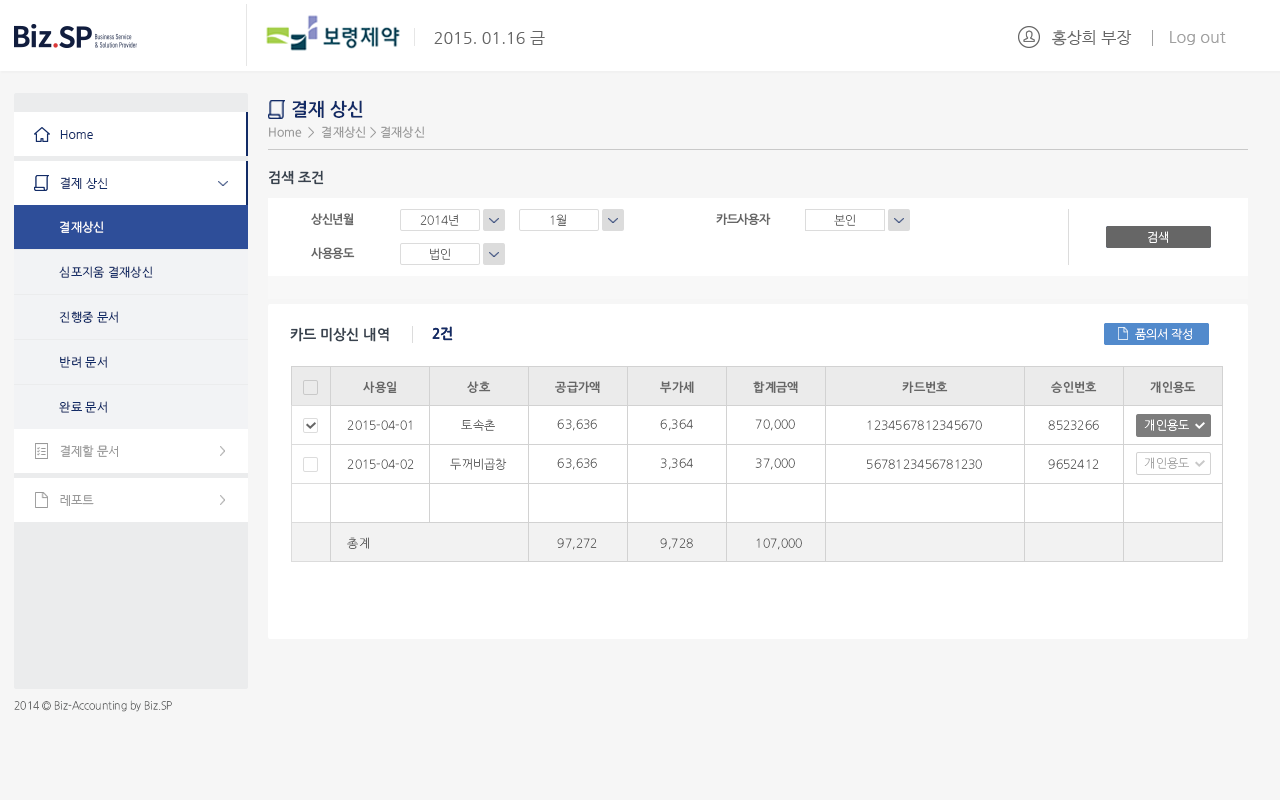
<style>
.page{position:relative;width:1280px;height:800px;background:#ffffff}
.page>*{position:absolute;margin:0}
.t1{font:16px "NanumGothic";color:#666666}
.t2{font:16px "NanumGothic";color:#a0a0a0}
.t3{font:18px "NanumGothicOTFBold";color:#122b66}
.t4{font:12px "NanumGothicOTF";color:#999999}
.t5{font:12px "NanumGothic";color:#122b66}
.t6{font:14px "NanumGothicOTFBold";color:#38424e}
.t7{font:12px "NanumGothicOTF";color:#ffffff}
.t8{font:12px "NanumGothicOTFBold";letter-spacing:-0.025em;color:#666666}
.t9{font:12px "NanumGothicOTFLight";letter-spacing:-0.025em;color:#666666}
.t10{font:12px "NanumGothicOTFLight";letter-spacing:-0.025em;color:#ffffff}
.t11{font:12px "NanumGothicOTF";color:#122b66}
.t12{font:14px "NanumGothicOTFBold";color:#122b66}
.t13{font:12px "NanumGothicOTFBold";color:#666666}
.t14{font:12px "NanumGothicOTFLight";color:#666666}
.t15{font:12px "NanumGothicOTFLight";color:#fefefe}
.t16{font:12px "NanumGothic";color:#999999}
.t17{font:12px "NanumGothicOTFLight"}
.t18{font:12px "NanumGothicOTFLight";color:#aaaaaa}
.t19{font:11px "NanumGothicOTFLight";color:#6c6d6d;scale:0.94 1}
</style>
<div class="page">
<p class="t1" style="left:1052px;top:30px;width:80px;height:16px">홍상희 부장</p>
<p class="t1" style="left:434px;top:31px;width:111px;height:14px">2015. 01.16 금</p>
<p class="t2" style="left:1170px;top:31px;width:56px;height:14px">Log out</p>
<p class="t3" style="left:292px;top:100px;width:71px;height:18px">결재 상신</p>
<p class="t4" style="left:269px;top:126px;width:156px;height:12px">Home  &gt;  결재상신 &gt; 결재상신</p>
<p class="t5" style="left:60px;top:130px;width:33px;height:9px">Home</p>
<p class="t5" style="left:60px;top:130px;width:33px;height:9px">Home</p>
<p class="t6" style="left:269px;top:170px;width:55px;height:15px">검색 조건</p>
<p class="t5" style="left:60px;top:177px;width:48px;height:12px">결제 상신</p>
<p class="t7" style="left:60px;top:221px;width:44px;height:12px">결재상신</p>
<p class="t8" style="left:311px;top:213px;width:43px;height:13px">상신년월</p>
<p class="t9" style="left:420px;top:214px;width:39px;height:12px">2014년</p>
<p class="t9" style="left:550px;top:214px;width:16px;height:12px">1월</p>
<p class="t8" style="left:716px;top:213px;width:55px;height:12px">카드사용자</p>
<p class="t9" style="left:834px;top:214px;width:21px;height:12px">본인</p>
<p class="t10" style="left:1148px;top:231px;width:20px;height:12px">검색</p>
<p class="t10" style="left:1148px;top:231px;width:20px;height:12px">검색</p>
<p class="t8" style="left:311px;top:247px;width:44px;height:12px">사용용도</p>
<p class="t9" style="left:430px;top:248px;width:20px;height:12px">법인</p>
<p class="t11" style="left:59px;top:266px;width:94px;height:12px">심포지움 결재상신</p>
<p class="t11" style="left:59px;top:311px;width:59px;height:12px">진행중 문서</p>
<p class="t6" style="left:290px;top:327px;width:99px;height:15px">카드 미상신 내역</p>
<p class="t12" style="left:432px;top:326px;width:21px;height:15px">2건</p>
<p class="t12" style="left:432px;top:326px;width:21px;height:15px">2건</p>
<p class="t10" style="left:1135px;top:328px;width:57px;height:12px">품의서 작성</p>
<p class="t10" style="left:1135px;top:328px;width:57px;height:12px">품의서 작성</p>
<p class="t11" style="left:60px;top:356px;width:47px;height:12px">반려 문서</p>
<p class="t13" style="left:363px;top:381px;width:34px;height:12px">사용일</p>
<p class="t13" style="left:363px;top:381px;width:34px;height:12px">사용일</p>
<p class="t13" style="left:467px;top:381px;width:24px;height:12px">상호</p>
<p class="t13" style="left:467px;top:381px;width:24px;height:12px">상호</p>
<p class="t13" style="left:555px;top:381px;width:45px;height:12px">공급가액</p>
<p class="t13" style="left:555px;top:381px;width:45px;height:12px">공급가액</p>
<p class="t13" style="left:660px;top:381px;width:34px;height:12px">부가세</p>
<p class="t13" style="left:660px;top:381px;width:34px;height:12px">부가세</p>
<p class="t13" style="left:753px;top:381px;width:45px;height:12px">합계금액</p>
<p class="t13" style="left:753px;top:381px;width:45px;height:12px">합계금액</p>
<p class="t13" style="left:902px;top:381px;width:46px;height:12px">카드번호</p>
<p class="t13" style="left:902px;top:381px;width:46px;height:12px">카드번호</p>
<p class="t13" style="left:1051px;top:381px;width:46px;height:12px">승인번호</p>
<p class="t13" style="left:1051px;top:381px;width:46px;height:12px">승인번호</p>
<p class="t13" style="left:1150px;top:381px;width:46px;height:12px">개인용도</p>
<p class="t13" style="left:1150px;top:381px;width:46px;height:12px">개인용도</p>
<p class="t11" style="left:59px;top:401px;width:48px;height:12px">완료 문서</p>
<p class="t14" style="left:347px;top:420px;width:65px;height:10px">2015-04-01</p>
<p class="t14" style="left:347px;top:420px;width:65px;height:10px">2015-04-01</p>
<p class="t14" style="left:347px;top:420px;width:65px;height:10px">2015-04-01</p>
<p class="t14" style="left:347px;top:420px;width:65px;height:10px">2015-04-01</p>
<p class="t14" style="left:461px;top:419px;width:34px;height:12px">토속촌</p>
<p class="t14" style="left:461px;top:419px;width:34px;height:12px">토속촌</p>
<p class="t14" style="left:461px;top:419px;width:34px;height:12px">토속촌</p>
<p class="t14" style="left:461px;top:419px;width:34px;height:12px">토속촌</p>
<p class="t14" style="left:557px;top:419px;width:40px;height:12px">63,636</p>
<p class="t14" style="left:557px;top:419px;width:40px;height:12px">63,636</p>
<p class="t14" style="left:557px;top:419px;width:40px;height:12px">63,636</p>
<p class="t14" style="left:557px;top:419px;width:40px;height:12px">63,636</p>
<p class="t14" style="left:660px;top:419px;width:33px;height:12px">6,363</p>
<p class="t14" style="left:660px;top:419px;width:33px;height:12px">6,364</p>
<p class="t14" style="left:660px;top:419px;width:33px;height:12px">6,363</p>
<p class="t14" style="left:660px;top:419px;width:33px;height:12px">6,364</p>
<p class="t14" style="left:755px;top:419px;width:40px;height:12px">70,000</p>
<p class="t14" style="left:755px;top:419px;width:40px;height:12px">70,000</p>
<p class="t14" style="left:755px;top:419px;width:40px;height:12px">70,000</p>
<p class="t14" style="left:755px;top:419px;width:40px;height:12px">70,000</p>
<p class="t14" style="left:867px;top:420px;width:115px;height:10px">1234567812345670</p>
<p class="t14" style="left:867px;top:420px;width:115px;height:10px">1234567812345670</p>
<p class="t14" style="left:867px;top:420px;width:115px;height:10px">1234567812345670</p>
<p class="t14" style="left:867px;top:420px;width:115px;height:10px">1234567812345670</p>
<p class="t14" style="left:1048px;top:420px;width:51px;height:10px">8523266</p>
<p class="t14" style="left:1048px;top:420px;width:51px;height:10px">8523266</p>
<p class="t14" style="left:1048px;top:420px;width:51px;height:10px">8523266</p>
<p class="t14" style="left:1048px;top:420px;width:51px;height:10px">8523266</p>
<p class="t15" style="left:1144px;top:419px;width:45px;height:12px">개인용도</p>
<p class="t16" style="left:60px;top:445px;width:58px;height:12px">결제할 문서</p>
<p class="t16" style="left:60px;top:445px;width:58px;height:12px">결제할 문서</p>
<p class="t14" style="left:347px;top:459px;width:65px;height:10px">2015-04-01</p>
<p class="t14" style="left:347px;top:459px;width:67px;height:10px">2015-04-02</p>
<p class="t14" style="left:347px;top:459px;width:65px;height:10px">2015-04-01</p>
<p class="t14" style="left:347px;top:459px;width:67px;height:10px">2015-04-02</p>
<p class="t14" style="left:450px;top:458px;width:57px;height:12px">두꺼비곱창</p>
<p class="t14" style="left:450px;top:458px;width:57px;height:12px">두꺼비곱창</p>
<p class="t14" style="left:557px;top:458px;width:40px;height:12px">63,636</p>
<p class="t14" style="left:557px;top:458px;width:40px;height:12px">63,636</p>
<p class="t14" style="left:557px;top:458px;width:40px;height:12px">63,636</p>
<p class="t14" style="left:557px;top:458px;width:40px;height:12px">63,636</p>
<p class="t17" style="left:660px;top:458px;width:33px;height:12px">6,363</p>
<p class="t14" style="left:660px;top:458px;width:33px;height:12px">3,364</p>
<p class="t17" style="left:660px;top:458px;width:33px;height:12px">6,363</p>
<p class="t14" style="left:660px;top:458px;width:33px;height:12px">3,364</p>
<p class="t14" style="left:755px;top:458px;width:40px;height:12px">70,000</p>
<p class="t14" style="left:755px;top:458px;width:40px;height:12px">37,000</p>
<p class="t14" style="left:755px;top:458px;width:40px;height:12px">70,000</p>
<p class="t14" style="left:755px;top:458px;width:40px;height:12px">37,000</p>
<p class="t14" style="left:867px;top:459px;width:115px;height:10px">5678123456781230</p>
<p class="t14" style="left:867px;top:459px;width:115px;height:10px">5678123456781230</p>
<p class="t14" style="left:1048px;top:459px;width:51px;height:10px">9652412</p>
<p class="t14" style="left:1048px;top:459px;width:51px;height:10px">9652412</p>
<p class="t18" style="left:1144px;top:457px;width:45px;height:12px">개인용도</p>
<p class="t16" style="left:60px;top:495px;width:34px;height:11px">레포트</p>
<p class="t16" style="left:60px;top:495px;width:34px;height:11px">레포트</p>
<p class="t14" style="left:347px;top:537px;width:22px;height:12px">총계</p>
<p class="t14" style="left:347px;top:537px;width:22px;height:12px">총계</p>
<p class="t14" style="left:557px;top:538px;width:40px;height:12px">97,272</p>
<p class="t14" style="left:557px;top:538px;width:40px;height:12px">97,272</p>
<p class="t14" style="left:660px;top:538px;width:33px;height:12px">9,728</p>
<p class="t14" style="left:660px;top:538px;width:33px;height:12px">9,728</p>
<p class="t14" style="left:756px;top:538px;width:46px;height:12px">107,000</p>
<p class="t14" style="left:756px;top:538px;width:46px;height:12px">107,000</p>
<p class="t19" style="left:14px;top:700px;width:158px;height:12px">2014 © Biz-Accounting by Biz.SP</p>
</div>
